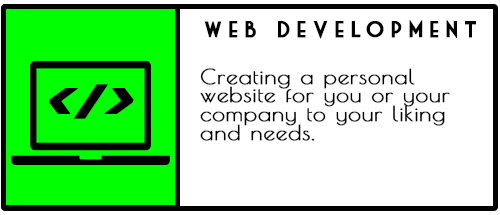
<style>
.page{position:relative;width:500px;height:215px;background:#ffffff}
.page>*{position:absolute;margin:0}
.t1{font:22.1px "MarketDeco";letter-spacing:0.26em;color:#000000;font-weight:bold}
.t2{font:20.2px "PoiretOne-Regular";letter-spacing:0.02em;color:#000000;font-weight:bold;scale:1.13 1}
.t3{font:49.3px "Horizon-Italic";letter-spacing:0.02em;color:#000000;font-weight:bold;scale:1.13 1}
</style>
<div class="page">
<p class="t1" style="left:204px;top:20px;width:272px;height:19px">Web development</p>
<p class="t2" style="left:200px;top:68px;width:250px;height:73px">Creating a personal <br>website for you or your<br>company to your liking <br>and needs.</p>
<p class="t3" style="left:49px;top:84px;width:85px;height:35px">&lt;/&gt;</p>
</div>
